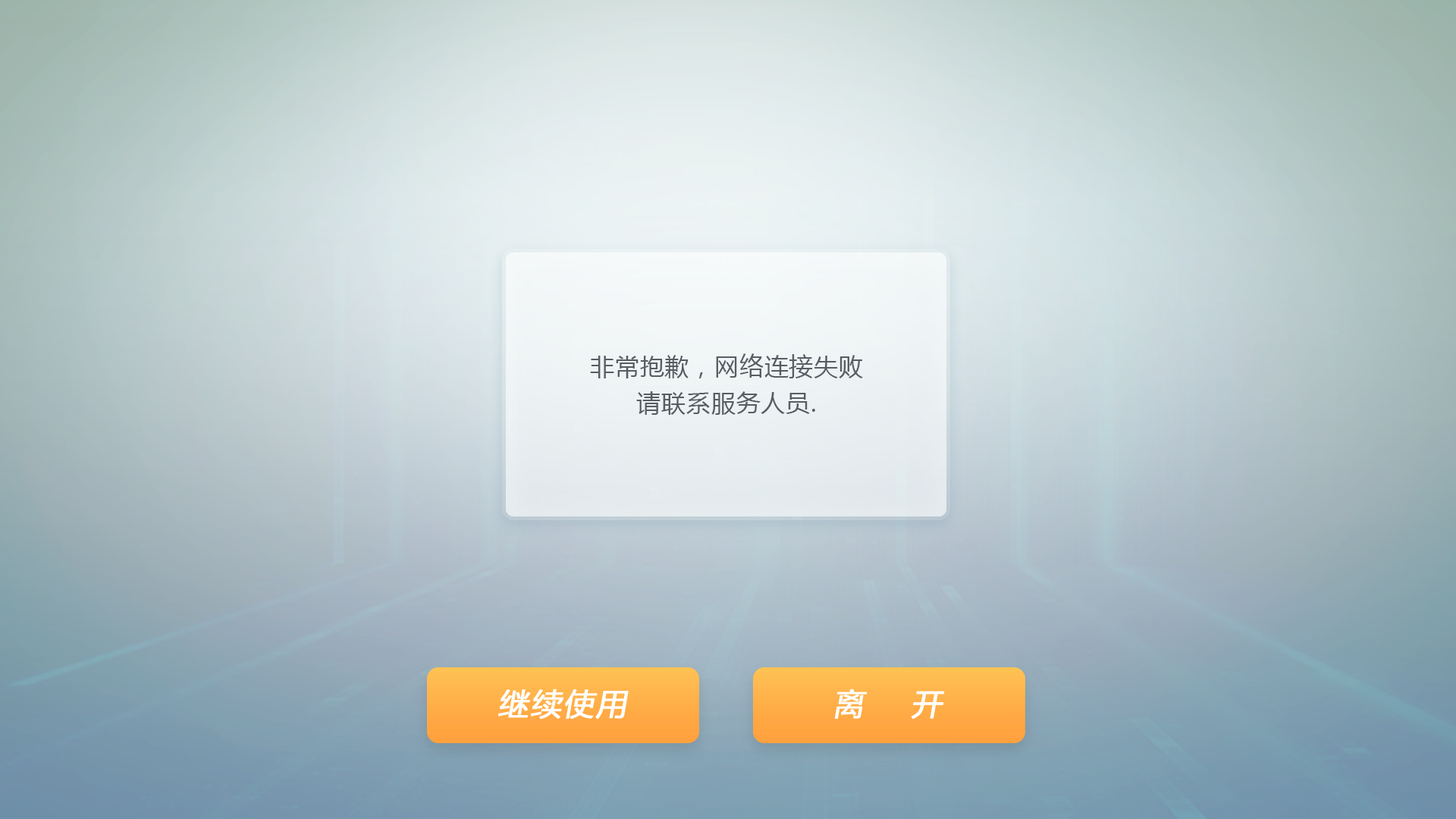
<style>
.page{position:relative;width:1456px;height:819px}
.page>*{position:absolute;margin:0}
.t1{font:24.3px/36.4px "MicrosoftYaHei";letter-spacing:0.025em;color:#565e63}
</style>
<div class="page">
<p class="t1" style="left:590px;top:353px;width:273px;height:62px;text-align:center">非常抱歉，网络连接失败<br>请联系服务人员.</p>
</div>
